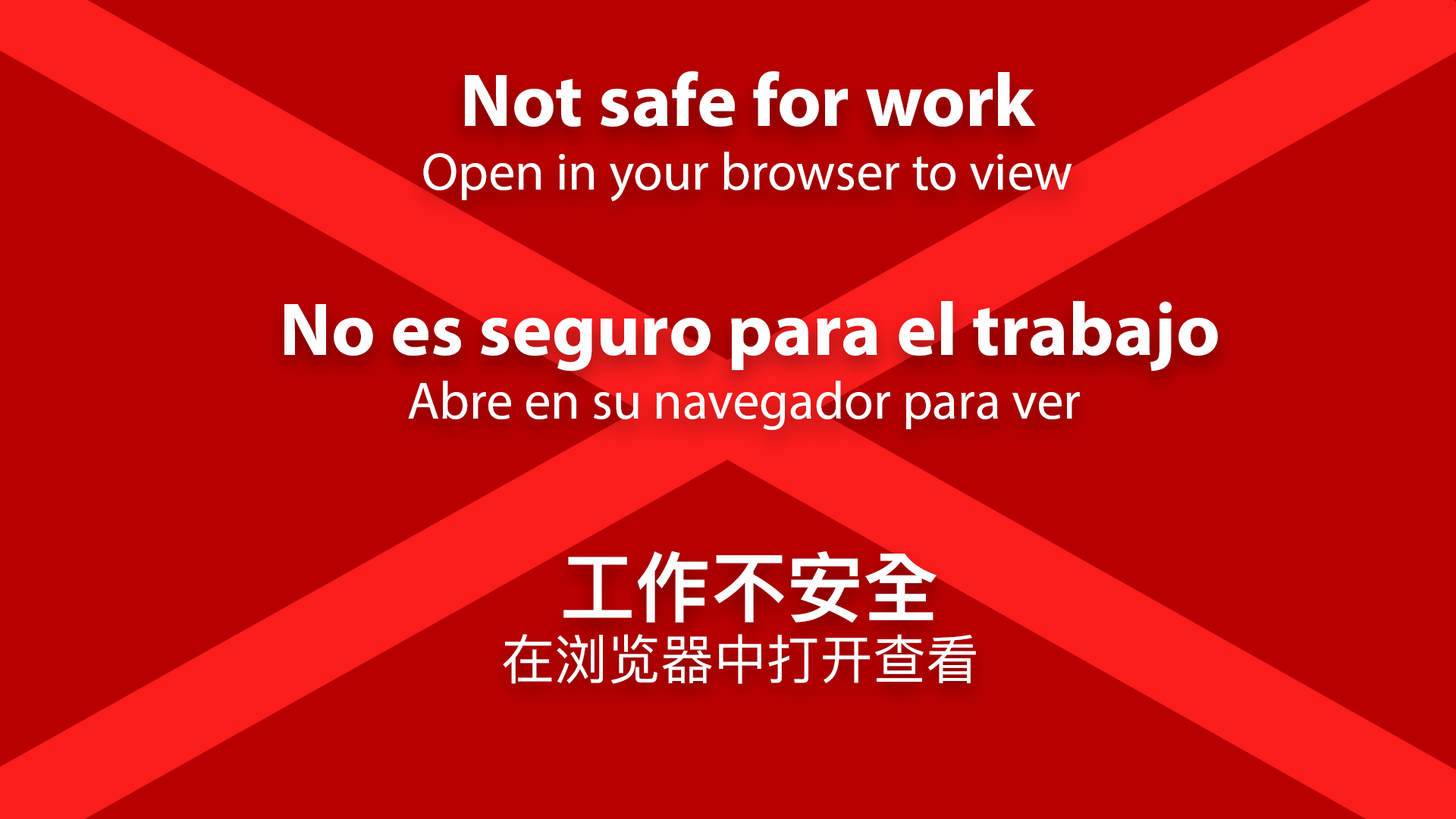
<style>
.page{position:relative;width:1456px;height:819px;background:#b80000}
.page>*{position:absolute;margin:0}
.t1{font:53.1px "MyriadPro-Regular";color:#ffffff}
.t2{font:75.8px "MyriadPro-Bold";color:#ffffff}
.t3{font:53.1px "PingFangSC-Regular";color:#ffffff}
.t4{font:75.8px "PingFangHK-Semibold";color:#ffffff}
</style>
<div class="page">
<p class="t1" style="left:423px;top:71px;width:649px;height:131px;text-align:center"><span class="t2">Not safe for work<br></span>Open in your browser to view</p>
<p class="t1" style="left:284px;top:301px;width:934px;height:129px;text-align:center"><span class="t2">No es seguro para el trabajo<br></span>Abre en su navegador para ver</p>
<p class="t3" style="left:503px;top:551px;width:473px;height:133px;text-align:center"><span class="t4">工作不安全<br></span>在浏览器中打开查看</p>
</div>
